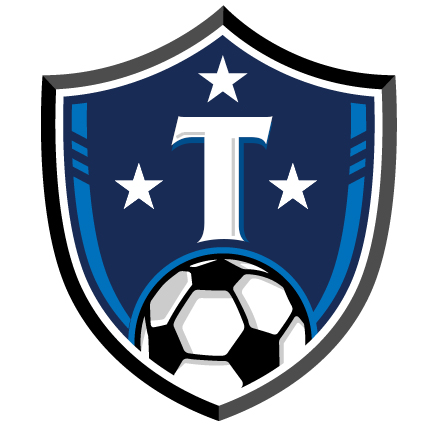
<style>
.page{position:relative;width:432px;height:432px;background:#ffffff}
.page>*{position:absolute;margin:0}
.t1{font:179.7px "FrizQuadrataC-Bold";color:#ffffff}
</style>
<div class="page">
<p class="t1" style="left:171px;top:122px;width:102px;height:127px">T</p>
<p class="t1" style="left:171px;top:116px;width:102px;height:127px">T</p>
<p class="t1" style="left:176px;top:117px;width:102px;height:127px">T</p>
</div>
